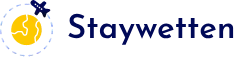
<style>
.page{position:relative;width:234px;height:57px;background:#ffffff}
.page>*{position:absolute;margin:0}
.t1{font:33px "JosefinSans-SemiBold";color:#000958}
</style>
<div class="page">
<p class="t1" style="left:68px;top:13px;width:166px;height:32px">Staywetten</p>
</div>
